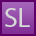
<style>
.page{position:relative;width:36px;height:36px;background:#5f0068}
.page>*{position:absolute;margin:0}
.t1{font:27.3px "MyriadPro-Regular";color:#d7d7d7}
</style>
<div class="page">
<p class="t1" style="left:5px;top:8px;width:25px;height:19px">SL</p>
</div>
